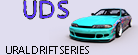
<style>
.page{position:relative;width:138px;height:55px;background:#e0ddef}
.page>*{position:absolute;margin:0}
.t1{font:25px "MyriadPro-Regular";color:#5634f2}
.t2{font:11.6px "MyriadPro-Regular";color:#000000}
</style>
<div class="page">
<p class="t1" style="left:24px;top:1px;width:12px;height:17px">U</p>
<p class="t1" style="left:40px;top:1px;width:14px;height:17px">D</p>
<p class="t1" style="left:58px;top:1px;width:10px;height:17px">S</p>
<p class="t2" style="left:6px;top:46px;width:83px;height:8px">URALDRIFTSERIES</p>
</div>
